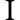
<style>
.page{position:relative;width:20px;height:20px;background:#ffffff}
.page>*{position:absolute;margin:0}
.t1{font:30px "TimesNewRomanPSMT";color:#000000}
</style>
<div class="page">
<p class="t1" style="left:5px;top:0px;width:10px;height:20px">I</p>
</div>
